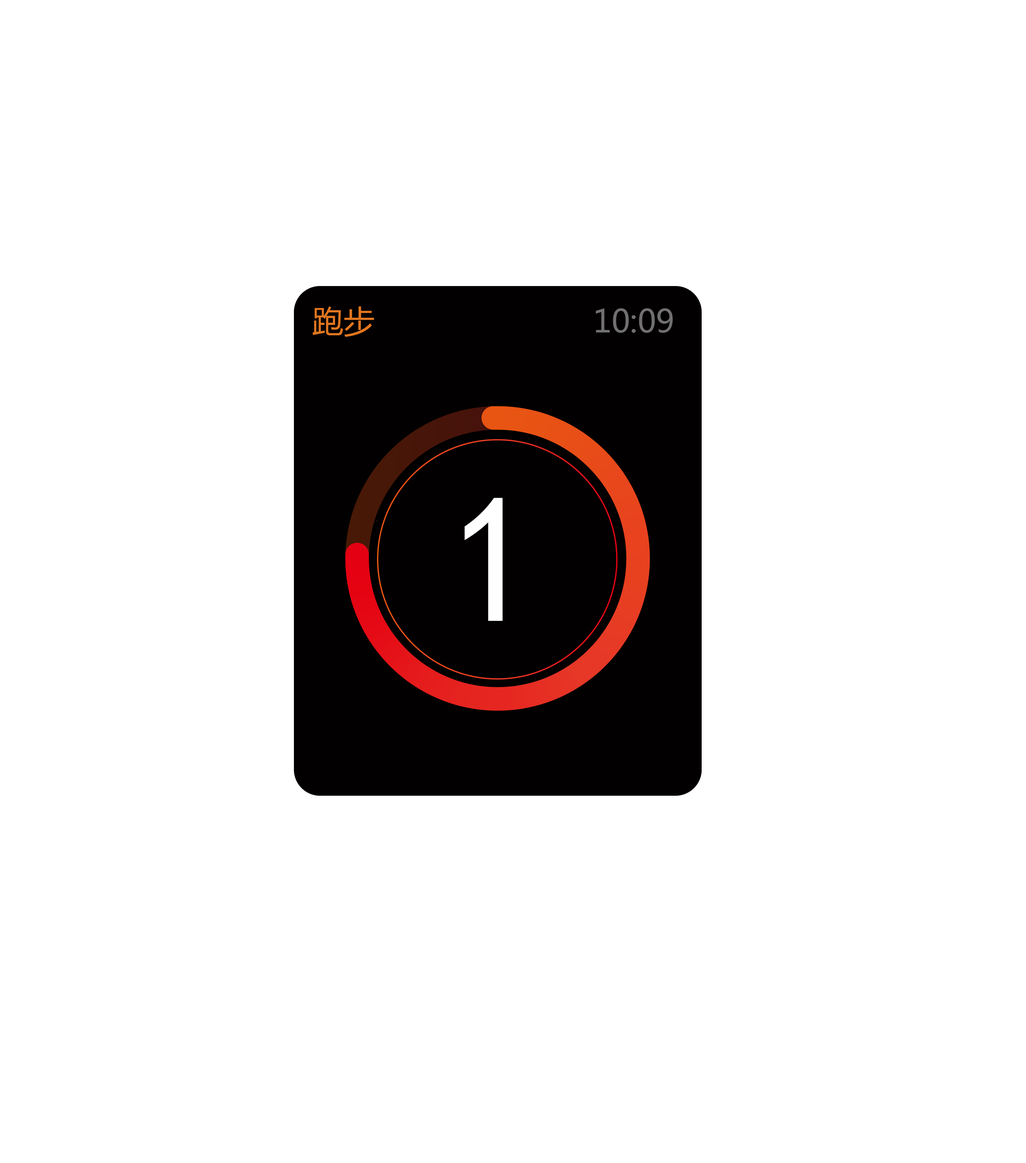
<style>
.page{position:relative;width:1026px;height:1163px;background:#ffffff}
.page>*{position:absolute;margin:0}
.t1{font:31.4px "MicrosoftYaHei";color:#e1761f}
.t2{font:31.4px "MicrosoftYaHei";color:#717071}
.t3{font:182.9px "SimHei";color:#ffffff}
</style>
<div class="page">
<p class="t1" style="left:312px;top:306px;width:62px;height:31px">跑步</p>
<p class="t2" style="left:595px;top:308px;width:78px;height:25px">10:09</p>
<p class="t3" style="left:464px;top:498px;width:39px;height:123px">1</p>
</div>
